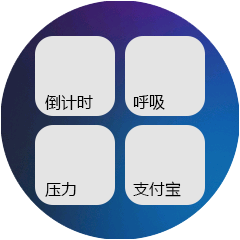
<style>
.page{position:relative;width:240px;height:240px;background:#e4e4e4}
.page>*{position:absolute;margin:0}
.t1{font:16px "MicrosoftYaHei";color:#000000;font-variant:small-caps}
</style>
<div class="page">
<p class="t1" style="left:45px;top:95px;width:48px;height:15px">倒计时</p>
<p class="t1" style="left:133px;top:95px;width:32px;height:15px">呼吸</p>
<p class="t1" style="left:45px;top:182px;width:31px;height:15px">压力</p>
<p class="t1" style="left:133px;top:181px;width:48px;height:16px">支付宝</p>
</div>
